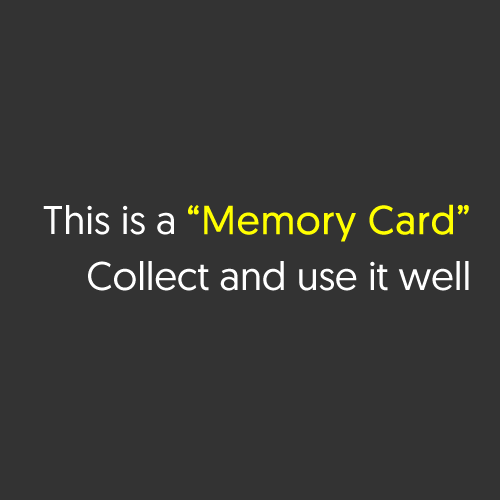
<style>
.page{position:relative;width:500px;height:500px;background:#333333}
.page>*{position:absolute;margin:0}
.t1{font:40px/56px "Geomanist-Regular";color:#ffffff}
.t2{font:40px/56px "Geomanist-Regular";color:#ffff00;font-weight:bold}
</style>
<div class="page">
<p class="t1" style="left:43px;top:204px;width:426px;height:87px;text-align:right">This is a <span class="t2">“Memory Card”<br></span>Collect and use it well</p>
</div>
